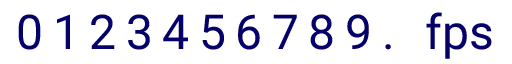
<style>
.page{position:relative;width:512px;height:64px;background:#ffffff}
.page>*{position:absolute;margin:0}
.t1{font:48px "Roboto-Regular";letter-spacing:0.2em;color:#050069}
.t2{font:48px "Roboto-Regular";color:#050069}
</style>
<div class="page">
<p class="t1" style="left:18px;top:12px;width:474px;height:47px">0123456789. <span class="t2">fps</span></p>
</div>
